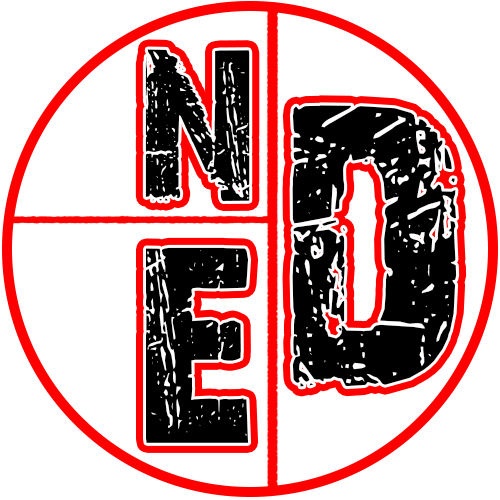
<style>
.page{position:relative;width:500px;height:500px;background:#ffffff}
.page>*{position:absolute;margin:0}
.t1{font:222.2px "28-Days-Later-Regular";color:#000000}
.t2{font:416.7px "28-Days-Later-Regular";color:#000000}
.t3{font:291.7px "28-Days-Later-Regular";color:#000000}
</style>
<div class="page">
<p class="t1" style="left:145px;top:49px;width:105px;height:152px">n</p>
<p class="t2" style="left:292px;top:105px;width:165px;height:282px">d</p>
<p class="t3" style="left:146px;top:247px;width:103px;height:196px">e</p>
</div>
